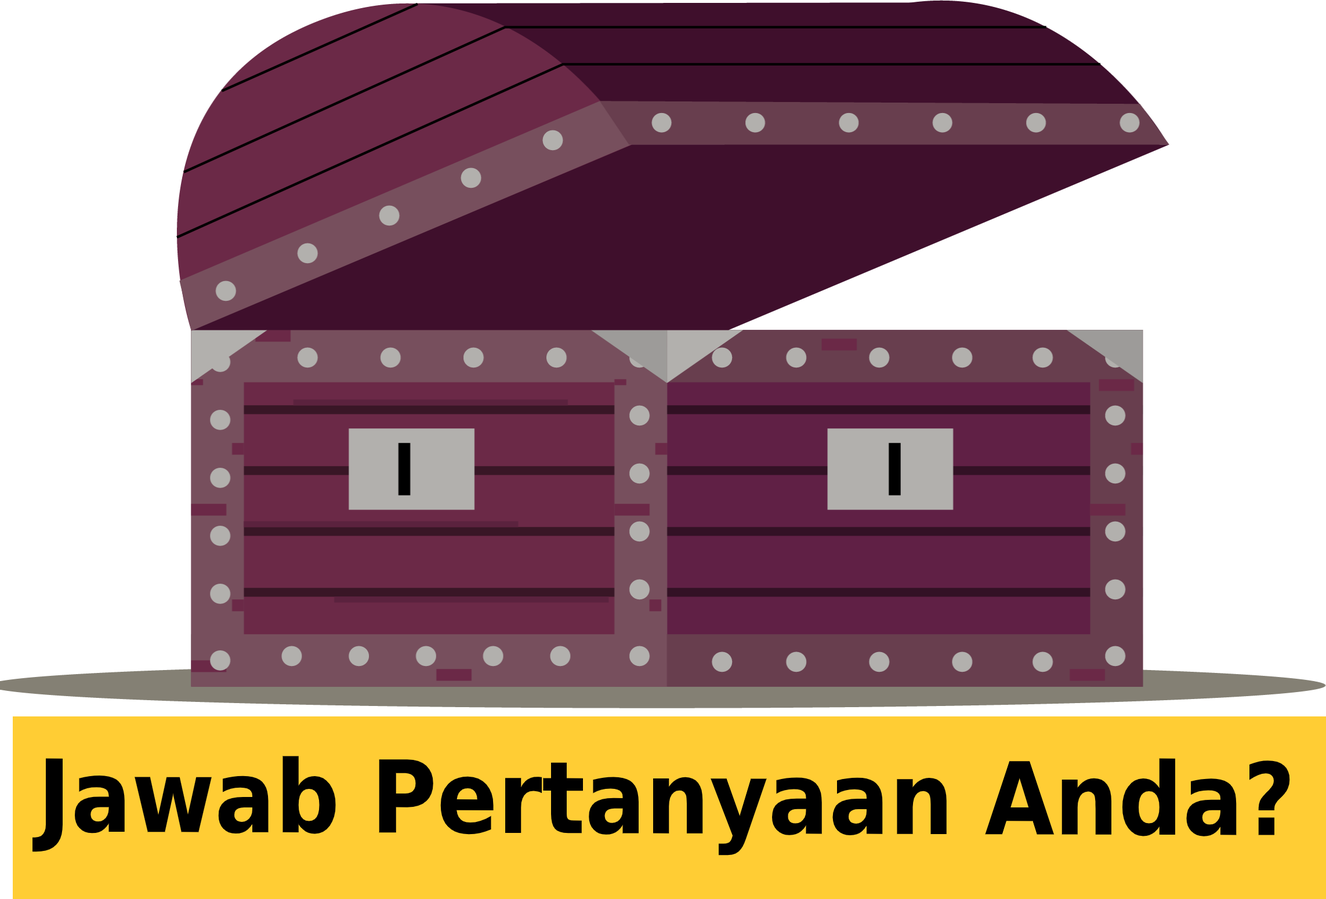
<style>
.page{position:relative;width:1326px;height:899px;background:#ffffff}
.page>*{position:absolute;margin:0}
.t1{font:100.3px "DejaVuSans-Bold";color:#000000;scale:0.9 1}
</style>
<div class="page">
<p class="t1" style="left:32px;top:756px;width:1258px;height:100px">Jawab Pertanyaan Anda?</p>
</div>
